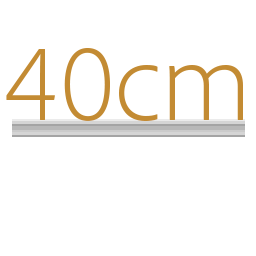
<style>
.page{position:relative;width:256px;height:256px;background:#ffffff}
.page>*{position:absolute;margin:0}
.t1{font:110.8px "AdobeClean-Light";color:#c38b33}
</style>
<div class="page">
<p class="t1" style="left:6px;top:48px;width:237px;height:73px">40cm</p>
</div>
